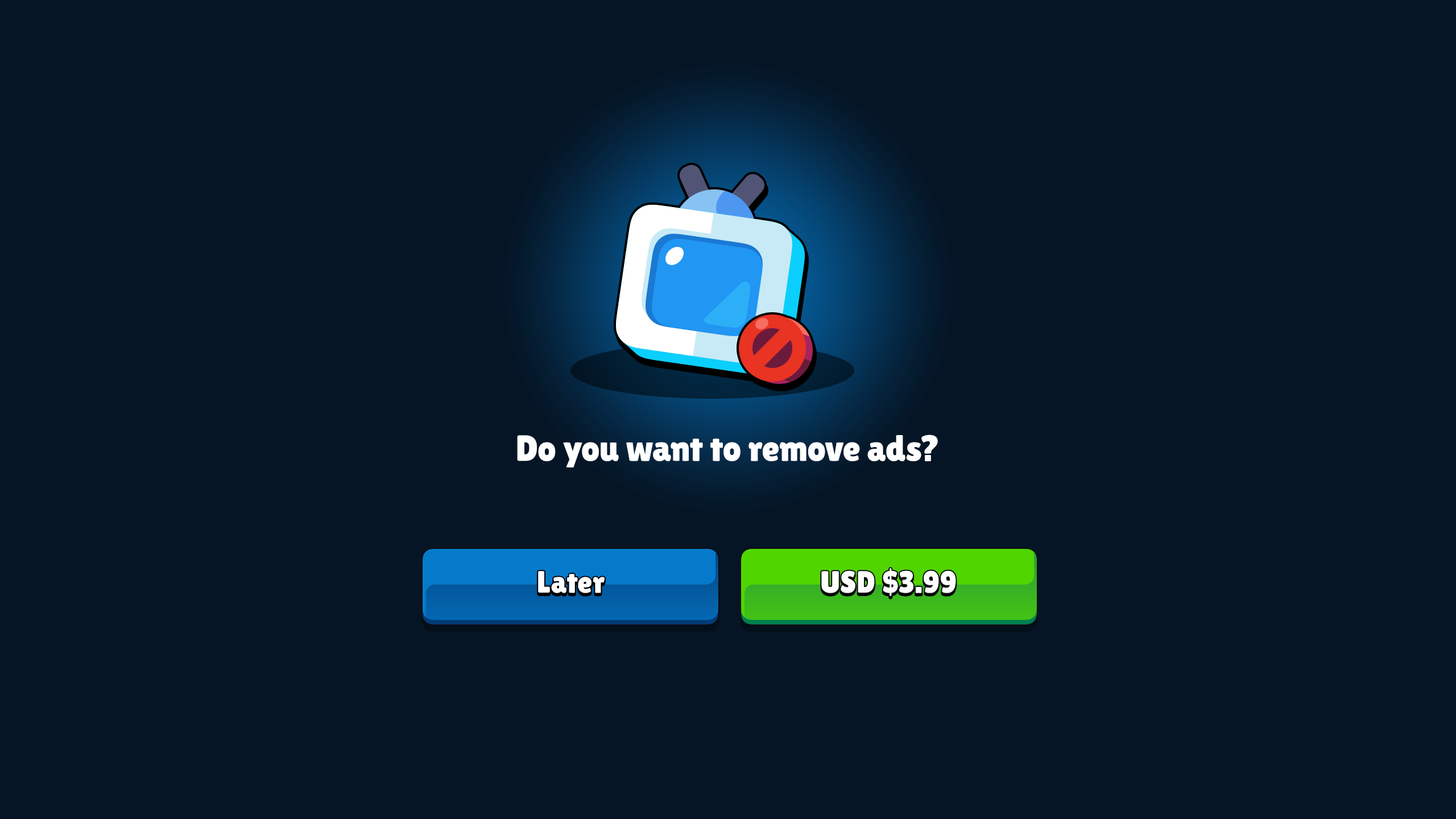
<style>
.page{position:relative;width:1456px;height:819px;background:#051525}
.page>*{position:absolute;margin:0}
.t1{font:36.4px "LilitaOne";color:#ffffff}
.t2{font:30.7px "LilitaOne";letter-spacing:0.02em;color:#ffffff}
</style>
<div class="page">
<p class="t1" style="left:517px;top:435px;width:421px;height:33px">Do you want to remove ads?</p>
<p class="t2" style="left:821px;top:568px;width:135px;height:28px">USD $3.99</p>
<p class="t2" style="left:538px;top:571px;width:67px;height:22px">Later</p>
</div>
